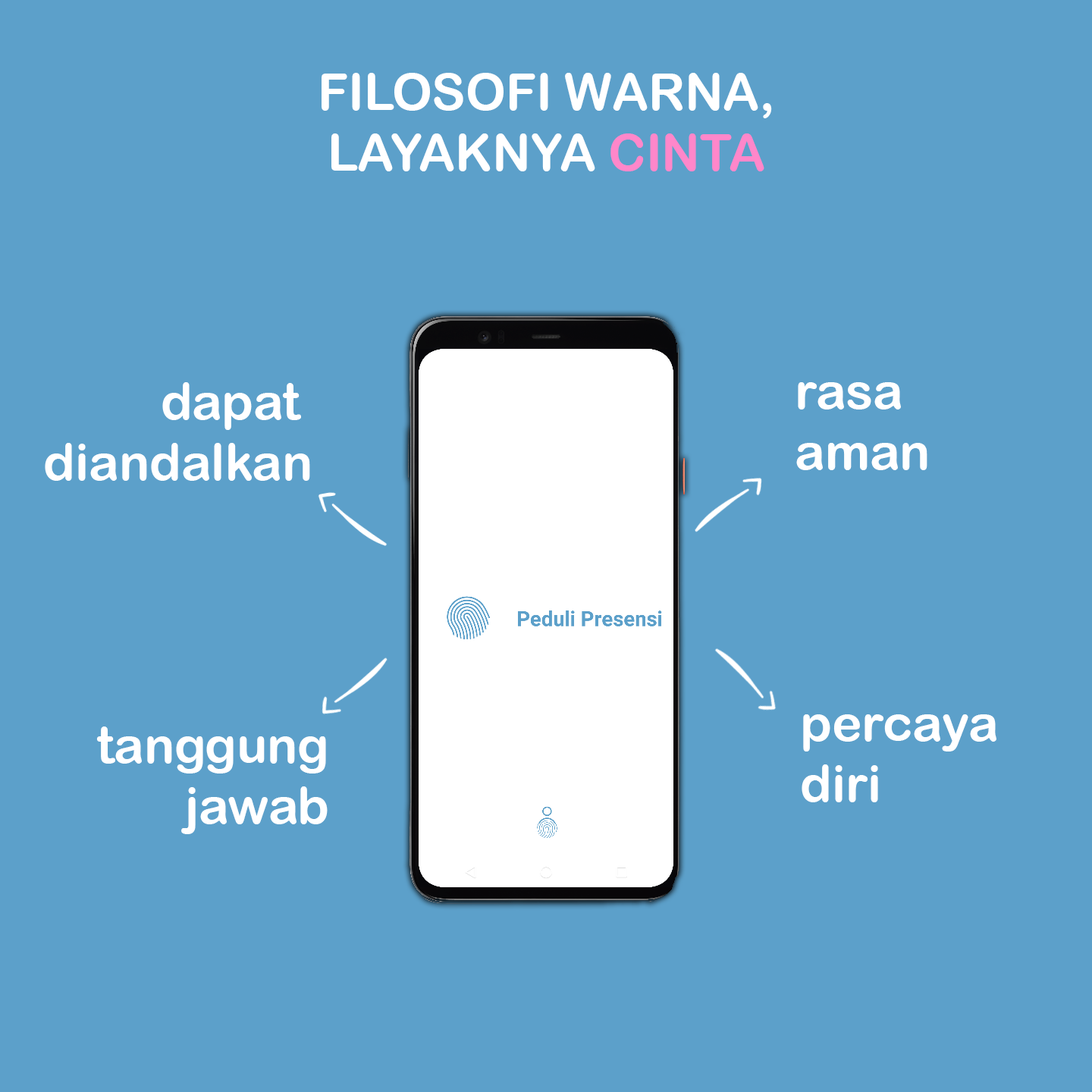
<style>
.page{position:relative;width:1092px;height:1092px;background:#5ca0ca}
.page>*{position:absolute;margin:0}
.t1{font:50.6px "ArialRoundedMTBold";color:#ffffff}
.t2{font:50.6px "ArialRoundedMTBold";color:#ff87ca}
</style>
<div class="page">
<p class="t1" style="left:322px;top:73px;width:450px;height:98px;text-align:center">FILOSOFI WARNA,<br>LAYAKNYA <span class="t2">CINTA</span></p>
<p class="t1" style="left:45px;top:382px;width:265px;height:99px">dapat <br>diandalkan</p>
<p class="t1" style="left:796px;top:382px;width:131px;height:88px;text-align:right">rasa <br>aman</p>
<p class="t1" style="left:802px;top:714px;width:194px;height:88px;text-align:right">percaya <br>diri</p>
<p class="t1" style="left:96px;top:726px;width:232px;height:108px">tanggung<br>jawab</p>
</div>
